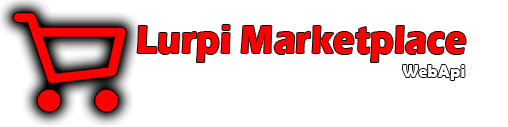
<style>
.page{position:relative;width:508px;height:127px;background:#ffffff}
.page>*{position:absolute;margin:0}
.t1{font:40.6px "ErasITC-Bold";color:#ff0000;scale:0.89 1}
.t2{font:16.7px "BerlinSansFBDemi-Bold";color:#ffffff;scale:1.05 1}
</style>
<div class="page">
<p class="t1" style="left:137px;top:25px;width:329px;height:37px">Lurpi Marketplace</p>
<p class="t2" style="left:403px;top:65px;width:62px;height:15px">WebApi</p>
</div>
